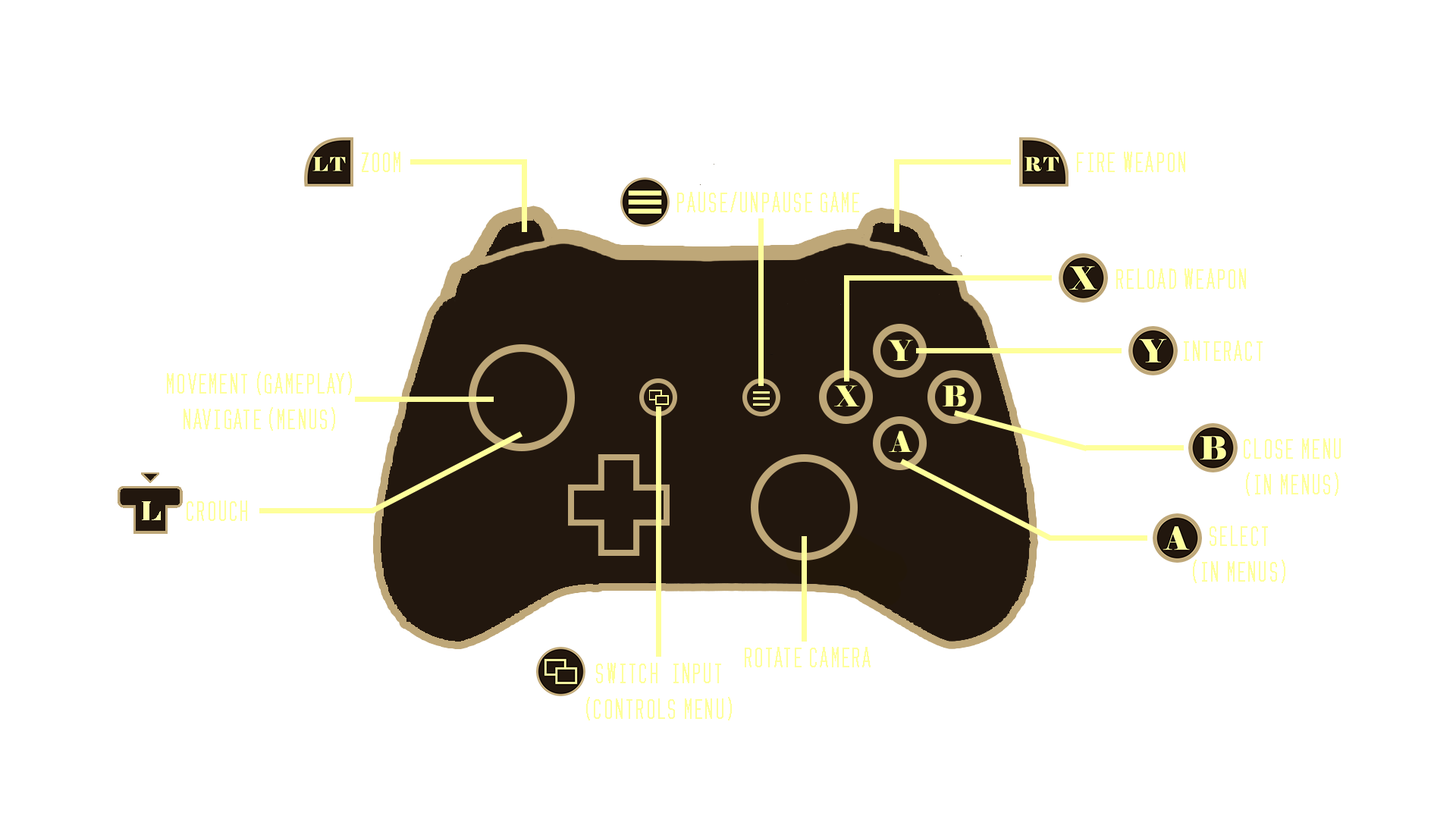
<style>
.page{position:relative;width:1456px;height:819px;background:#ffffff}
.page>*{position:absolute;margin:0}
.t1{font:23.4px "Zzyzx";letter-spacing:0.1em;color:#feff9b}
.t2{font:28.6px "Elephant-Regular";letter-spacing:0.05em;color:#feff9b}
.t3{font:23.4px/35.7px "Zzyzx";letter-spacing:0.1em;color:#feff9b}
</style>
<div class="page">
<p class="t1" style="left:362px;top:152px;width:38px;height:20px">Zoom</p>
<p class="t1" style="left:1077px;top:152px;width:108px;height:20px">fire weapon</p>
<p class="t1" style="left:677px;top:192px;width:182px;height:20px">pause/unpause game</p>
<p class="t1" style="left:1116px;top:268px;width:130px;height:21px">reload weapon</p>
<p class="t2" style="left:888px;top:340px;width:25px;height:21px">Y</p>
<p class="t1" style="left:1184px;top:340px;width:79px;height:21px">Interact</p>
<p class="t3" style="left:167px;top:372px;width:185px;height:59px;text-align:center">movement (gameplay)<br>navigate (menus)</p>
<p class="t2" style="left:834px;top:385px;width:26px;height:21px">X</p>
<p class="t2" style="left:943px;top:385px;width:23px;height:21px">B</p>
<p class="t2" style="left:889px;top:431px;width:23px;height:21px">A</p>
<p class="t3" style="left:1244px;top:438px;width:97px;height:58px;text-align:center">Close menu<br>(in menus)</p>
<p class="t1" style="left:187px;top:500px;width:60px;height:21px">CROUCH</p>
<p class="t3" style="left:1193px;top:526px;width:92px;height:57px;text-align:center">Select<br>(in menus)</p>
<p class="t1" style="left:745px;top:647px;width:126px;height:20px">rotate camera</p>
<p class="t3" style="left:586px;top:663px;width:146px;height:57px;text-align:center">switch  input<br>(controls menu)</p>
</div>
